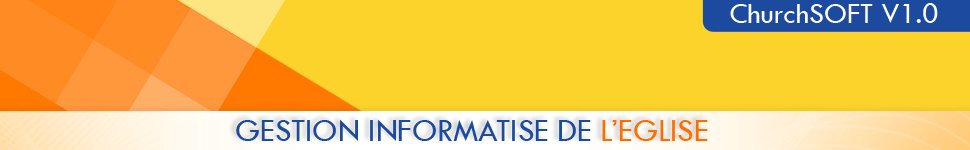
<style>
.page{position:relative;width:970px;height:150px;background:#fbd32b}
.page>*{position:absolute;margin:0}
.t1{font:29.7px "TwCenMT-Regular";color:#ffffff}
.t2{font:32.6px "TwCenMT-Regular";color:#1b4a9f}
.t3{font:32.6px "TwCenMT-Regular";color:#ff6d01}
</style>
<div class="page">
<p class="t1" style="left:730px;top:3px;width:208px;height:20px">ChurchSOFT V1.0</p>
<p class="t2" style="left:236px;top:119px;width:472px;height:22px">GESTION INFORMATISE DE <span class="t3">L’EGLISE</span></p>
</div>
